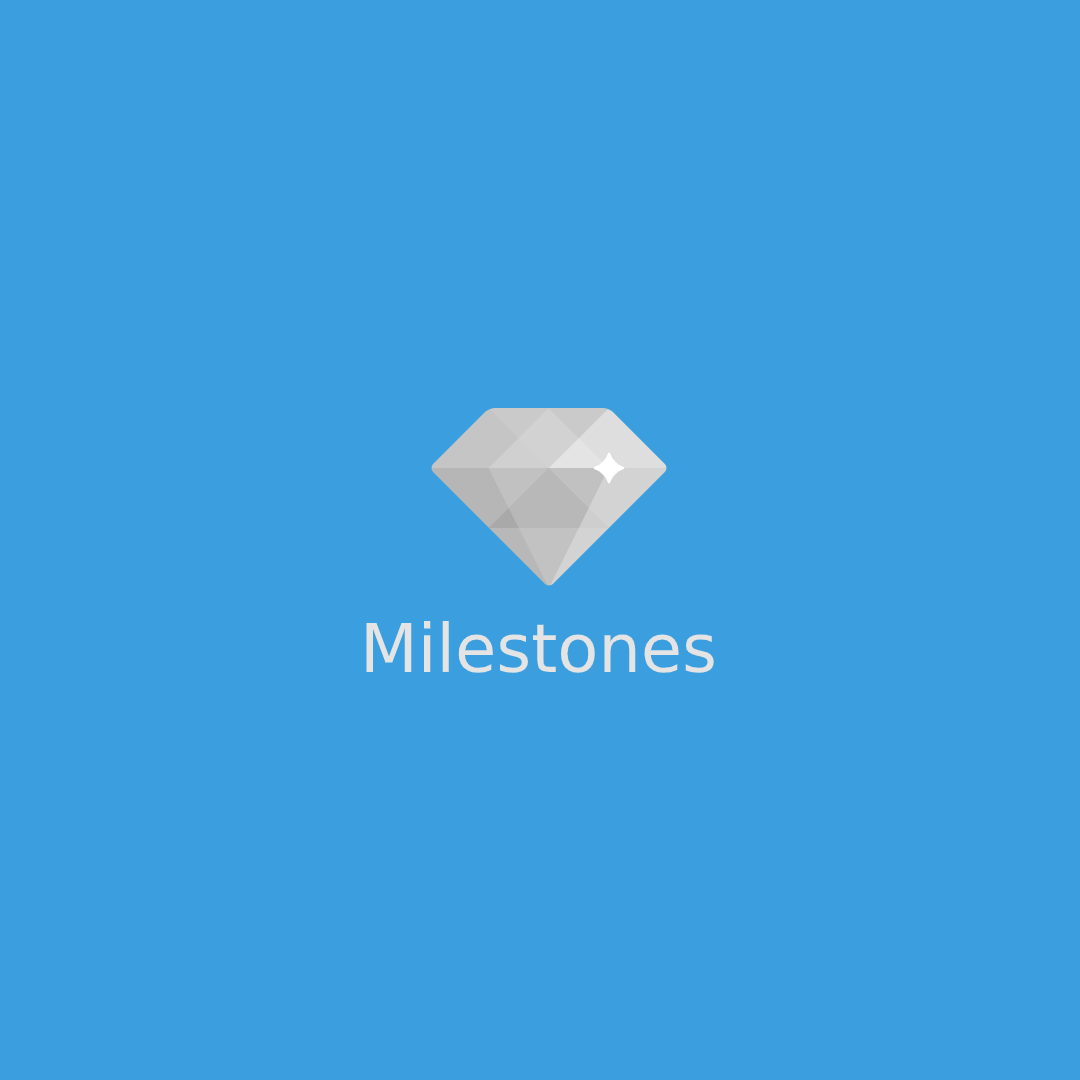
<style>
.page{position:relative;width:1080px;height:1080px;background:#3b9fdf}
.page>*{position:absolute;margin:0}
.t1{font:67px "DejaVuSans";color:#e4e4e4}
</style>
<div class="page">
<p class="t1" style="left:366px;top:621px;width:348px;height:52px">Milestones</p>
</div>
